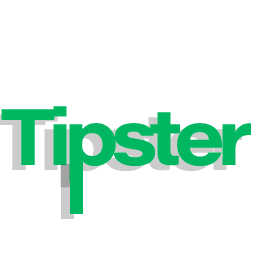
<style>
.page{position:relative;width:256px;height:256px;background:#ffffff}
.page>*{position:absolute;margin:0}
.t1{font:79px "AcuminConcept-WideBold";letter-spacing:-0.1em;color:#00b761}
.t2{font:79px "AcuminConcept-WideBold";letter-spacing:-0.1em;color:#00b761;text-transform:uppercase}
</style>
<div class="page">
<p class="t1" style="left:1px;top:106px;width:250px;height:77px"><span class="t2">T</span>ipster</p>
</div>
